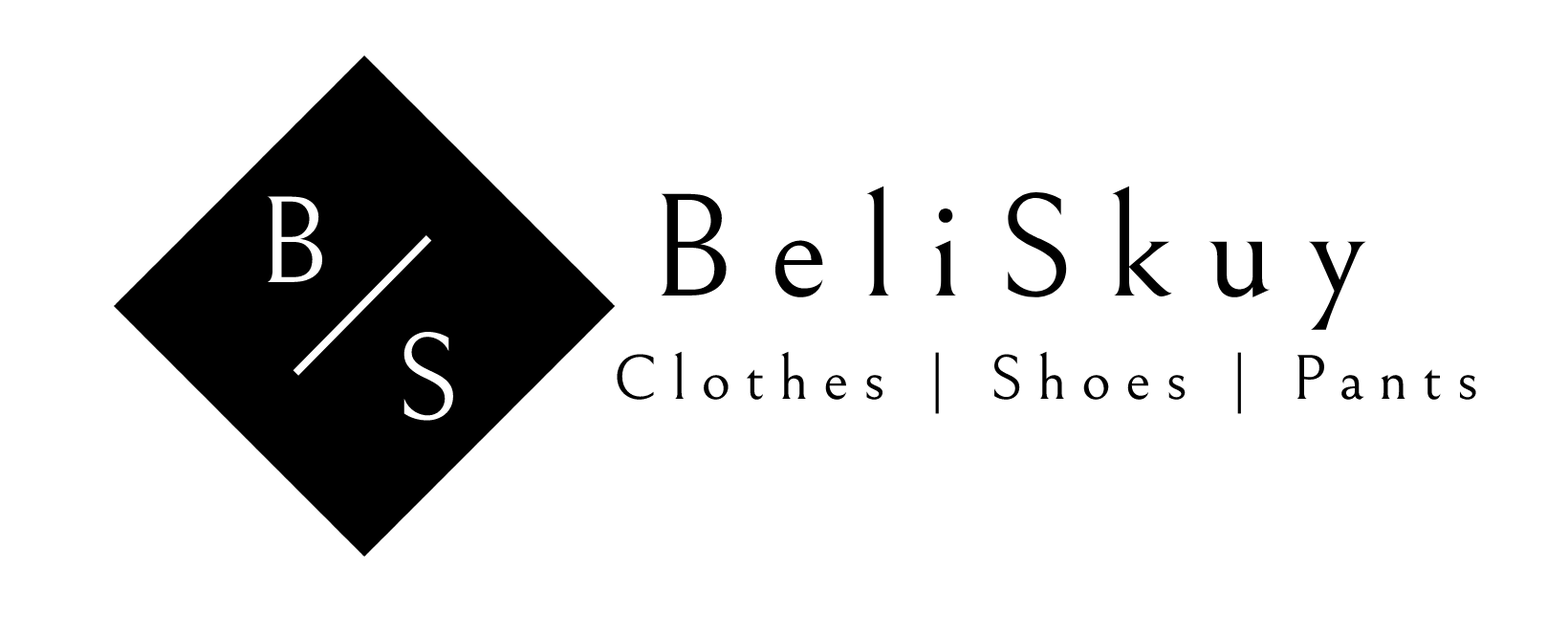
<style>
.page{position:relative;width:1568px;height:635px;background:#ffffff}
.page>*{position:absolute;margin:0}
.t1{font:147.6px "Bellefair-Regular";letter-spacing:0.229em;color:#000000}
.t2{font:124.3px "Bellefair-Regular";color:#ffffff}
.t3{font:63.6px "Bellefair-Regular";letter-spacing:0.229em;color:#000000}
</style>
<div class="page">
<p class="t1" style="left:661px;top:185px;width:706px;height:145px">BeliSkuy</p>
<p class="t2" style="left:267px;top:196px;width:55px;height:86px">B</p>
<p class="t2" style="left:403px;top:332px;width:50px;height:89px">S</p>
<p class="t3" style="left:617px;top:351px;width:859px;height:63px">Clothes | Shoes | Pants</p>
</div>
